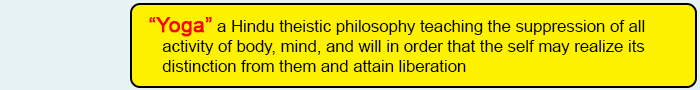
<style>
.page{position:relative;width:700px;height:90px;background:#fff200}
.page>*{position:absolute;margin:0}
.t1{font:16.7px "ArialMT";color:#020202}
.t2{font:20.8px "ArialMT";color:#fd010d;font-weight:bold}
</style>
<div class="page">
<p class="t1" style="left:149px;top:17px;width:496px;height:55px"><span class="t2">“Yoga”</span> a Hindu theistic philosophy teaching the suppression of all <br>   activity of body, mind, and will in order that the self may realize its <br>   distinction from them and attain liberation</p>
</div>
